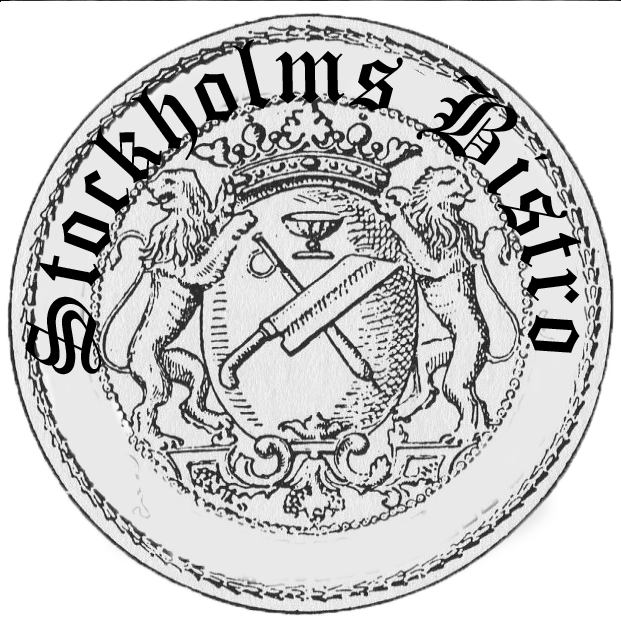
<style>
.page{position:relative;width:621px;height:622px;background:#ffffff}
.page>*{position:absolute;margin:0}
.t1{font:100px "OldEnglishTextMT";color:#000000}
</style>
<div class="page">
<p class="t1" style="left:25px;top:38px;width:557px;height:336px">Stockholms Bistro</p>
</div>
